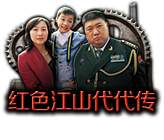
<style>
.page{position:relative;width:164px;height:140px;background:#ffffff}
.page>*{position:absolute;margin:0}
.t1{font:22.4px "FZZZHUNHJW--GB1-0";letter-spacing:-0.06em}
</style>
<div class="page">
<p class="t1" style="left:8px;top:91px;width:148px;height:21px">红色江山代代传</p>
</div>
